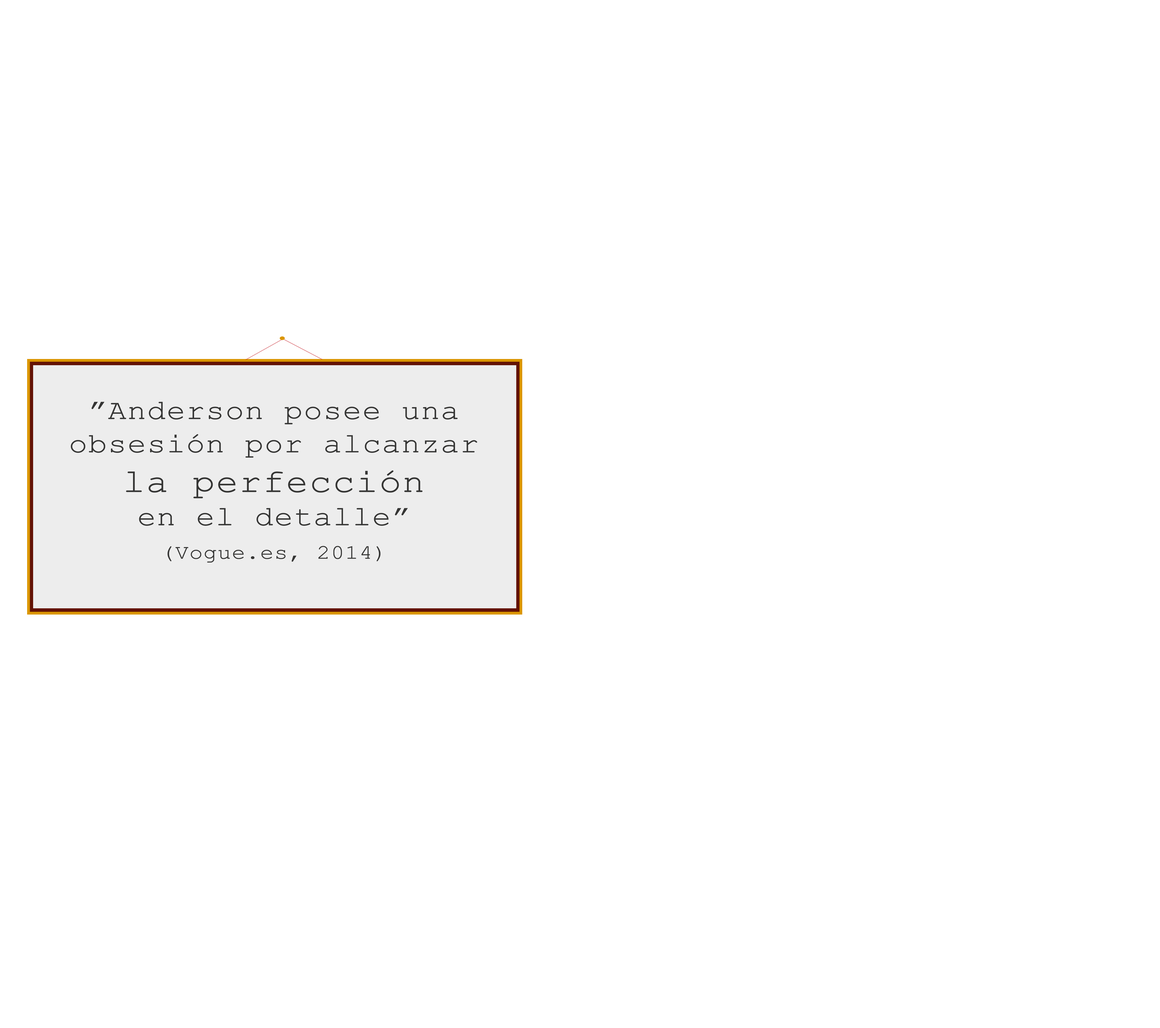
<style>
.page{position:relative;width:1160px;height:1028px;background:#ffffff}
.page>*{position:absolute;margin:0}
.t1{font:27.8px "CourierNewPSMT";letter-spacing:0.005em;color:#353534;font-weight:bold;scale:1.12 1}
.t2{font:33px "CourierNewPSMT";letter-spacing:0.005em;color:#353534;font-weight:bold;scale:1.12 1}
.t3{font:20.1px/16.7px "CourierNewPSMT";letter-spacing:0.005em;color:#353534;font-weight:bold;scale:1.12 1}
</style>
<div class="page">
<p class="t1" style="left:71px;top:402px;width:406px;height:161px;text-align:center">”Anderson posee una <br>obsesión por alcanzar <span class="t2">la perfección</span> <br>en el detalle”<br><span class="t3"> <br>(Vogue.es, 2014)</span></p>
</div>
